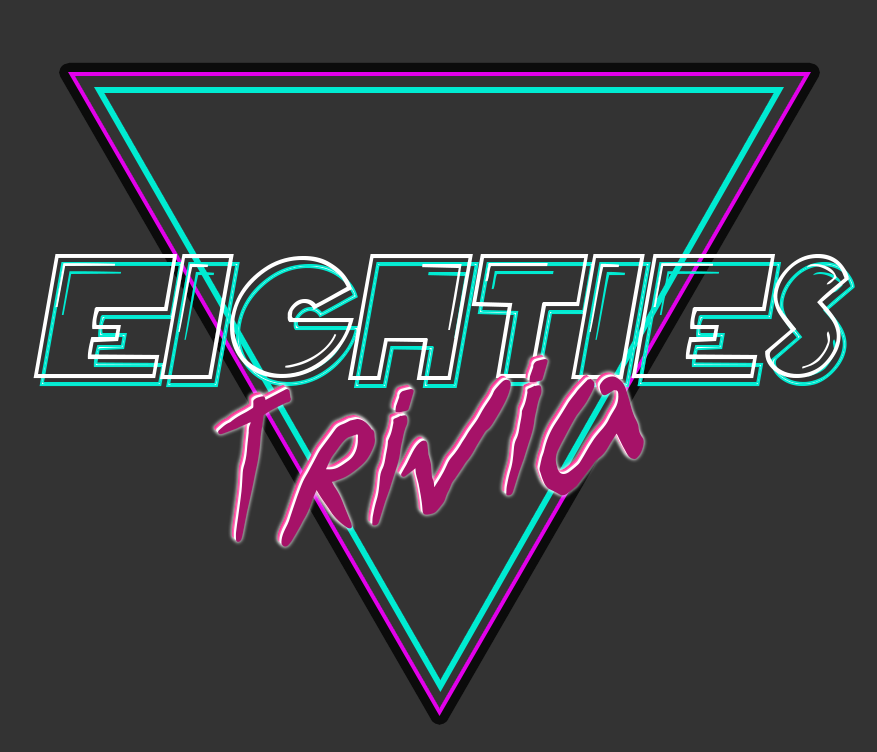
<style>
.page{position:relative;width:877px;height:752px;background:#333333}
.page>*{position:absolute;margin:0}
.t1{font:125.8px "PacFont";color:#ffffff;text-transform:uppercase;font-style:italic}
.t2{font:125.8px "PacFont";text-transform:uppercase;font-style:italic}
.t3{font:193.7px "ENDLESSBUMMER-Regular";font-style:italic}
</style>
<div class="page">
<p class="t1" style="left:33px;top:254px;width:816px;height:126px">Eighties</p>
<p class="t2" style="left:39px;top:262px;width:816px;height:126px">Eighties</p>
<p class="t3" style="left:214px;top:354px;width:426px;height:189px;rotate:-13deg">Trivia</p>
</div>
